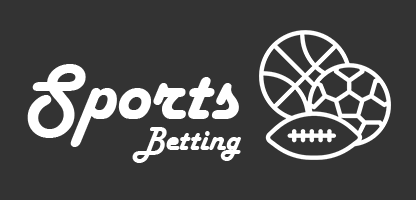
<style>
.page{position:relative;width:416px;height:200px;background:#333333}
.page>*{position:absolute;margin:0}
.t1{font:83.4px "HarlowSolid";color:#ffffff}
.t2{font:34px "HarlowSolid";color:#ffffff}
</style>
<div class="page">
<p class="t1" style="left:27px;top:64px;width:212px;height:83px">Sports</p>
<p class="t2" style="left:132px;top:127px;width:109px;height:36px">Betting</p>
</div>
